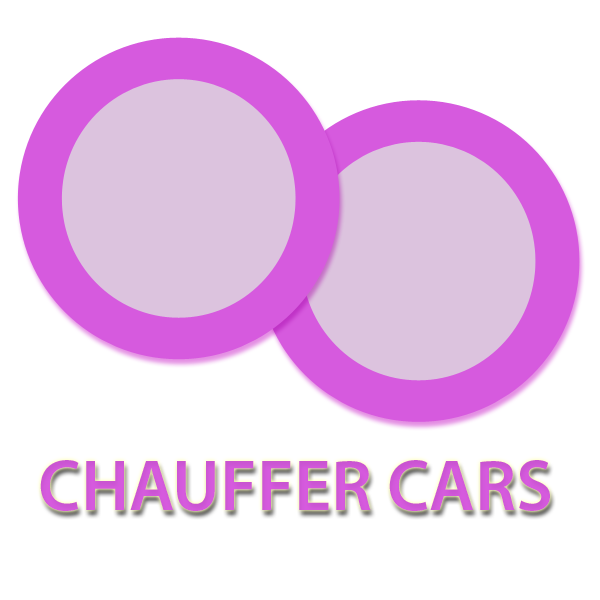
<style>
.page{position:relative;width:600px;height:600px;background:#ffffff}
.page>*{position:absolute;margin:0}
.t1{font:72px "MyriadPro-Semibold";color:#d65ade}
</style>
<div class="page">
<p class="t1" style="left:40px;top:460px;width:510px;height:51px">CHAUFFER CARS</p>
</div>
